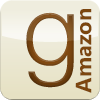
<style>
.page{position:relative;width:100px;height:100px}
.page>*{position:absolute;margin:0}
.t1{font:22px "SegoeUI-Bold";color:#7c460f}
</style>
<div class="page">
<p class="t1" style="left:75px;top:9px;width:17px;height:84px;rotate:-90deg">Amazon</p>
</div>
